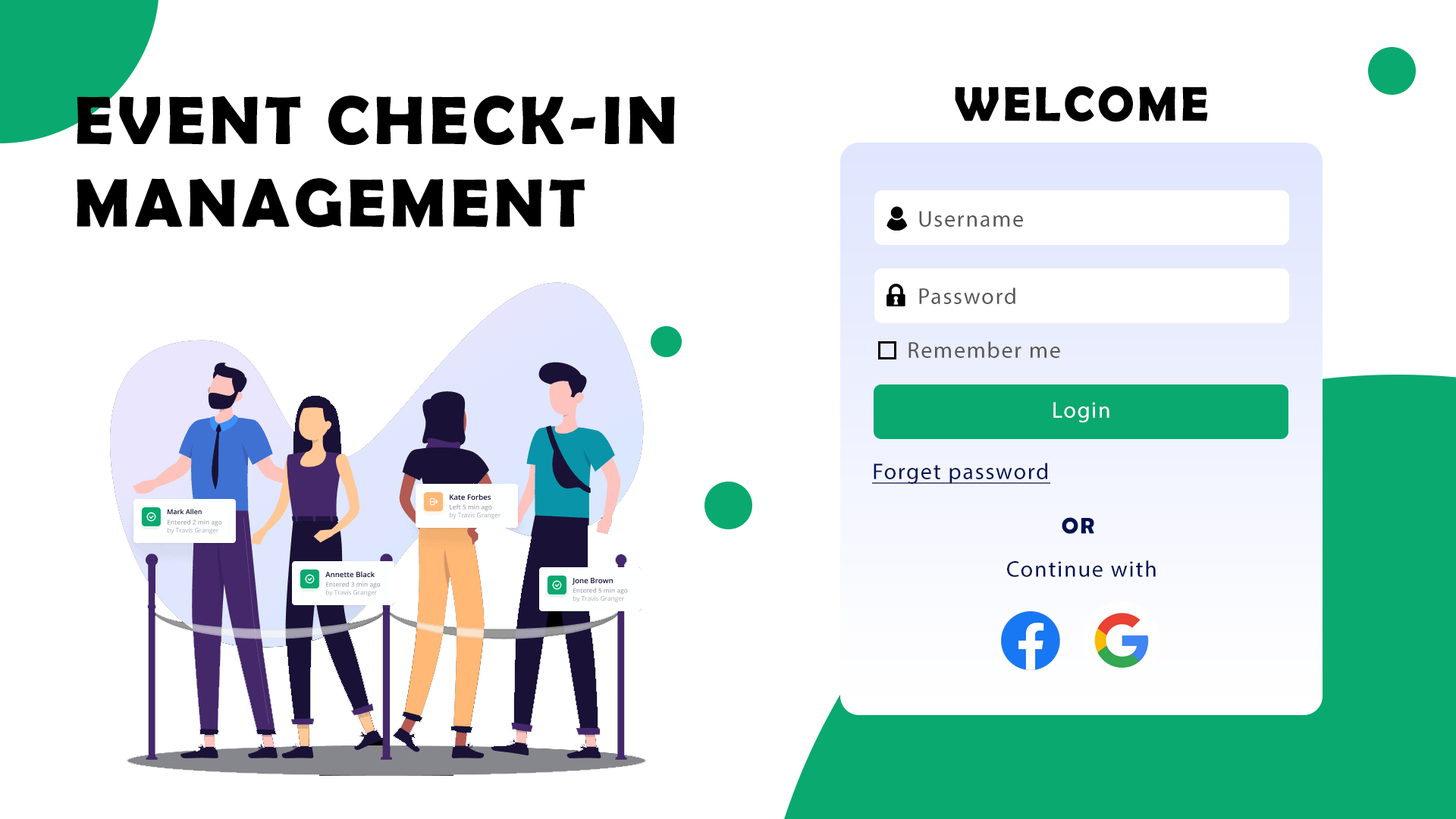
<style>
.page{position:relative;width:1456px;height:819px;background:#ffffff}
.page>*{position:absolute;margin:0}
.t1{font:49.3px "BerlinSansFBDemi-Bold";letter-spacing:0.06em;color:#000000}
.t2{font:68.9px "BerlinSansFBDemi-Bold";letter-spacing:0.06em;color:#000000}
.t3{font:22.7px "MyriadPro-Regular";letter-spacing:0.06em;color:#595959}
.t4{font:22.7px "MyriadPro-Regular";letter-spacing:0.06em;color:#ffffff}
.t5{font:22.7px "MyriadPro-Regular";letter-spacing:0.06em;color:#001352;text-decoration:underline}
.t6{font:22.7px "BerlinSansFBDemi-Bold";letter-spacing:0.06em;color:#001352}
.t7{font:22.7px "MyriadPro-Regular";letter-spacing:0.06em;color:#001352}
</style>
<div class="page">
<p class="t1" style="left:955px;top:86px;width:253px;height:36px">WELCOME</p>
<p class="t2" style="left:77px;top:96px;width:598px;height:131px;text-align:justify">EVENT CHECK-IN<br>MANAGEMENT</p>
<p class="t3" style="left:919px;top:211px;width:104px;height:16px">Username</p>
<p class="t3" style="left:919px;top:287px;width:96px;height:17px">Password</p>
<p class="t3" style="left:908px;top:341px;width:152px;height:17px">Remember me</p>
<p class="t4" style="left:1053px;top:402px;width:56px;height:20px">Login</p>
<p class="t5" style="left:872px;top:463px;width:178px;height:21px">Forget password</p>
<p class="t6" style="left:1062px;top:517px;width:32px;height:17px">OR</p>
<p class="t7" style="left:1007px;top:560px;width:149px;height:17px">Continue with</p>
</div>
